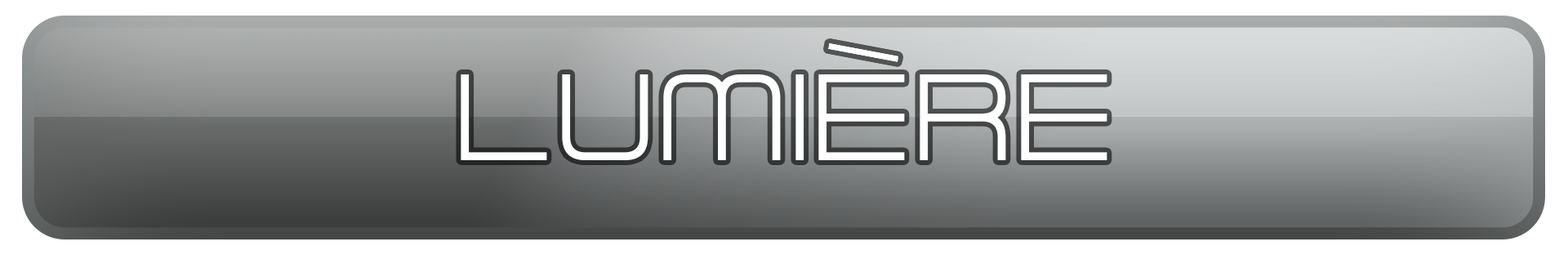
<style>
.page{position:relative;width:1568px;height:255px}
.page>*{position:absolute;margin:0}
.t1{font:159.2px "FuturisticArmour";color:#ffffff}
</style>
<div class="page">
<p class="t1" style="left:461px;top:74px;width:646px;height:86px">lumiere</p>
</div>
